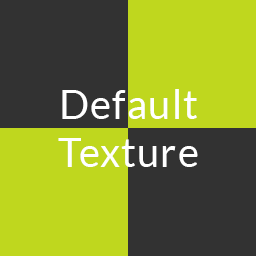
<style>
.page{position:relative;width:256px;height:256px;background:#bfd71e}
.page>*{position:absolute;margin:0}
.t1{font:40px "Lato-Regular";letter-spacing:0.03em;color:#ffffff}
</style>
<div class="page">
<p class="t1" style="left:58px;top:89px;width:140px;height:78px;text-align:center">Default<br>Texture</p>
</div>
